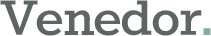
<style>
.page{position:relative;width:211px;height:36px;background:#ffffff}
.page>*{position:absolute;margin:0}
.t1{font:58px "Rokkitt-Bold";letter-spacing:-0.025em;color:#5e6562}
.t2{font:58px "Rokkitt-Bold";letter-spacing:-0.025em;color:#84af9b}
</style>
<div class="page">
<p class="t1" style="left:0px;top:0px;width:211px;height:36px">Venedor<span class="t2">.</span></p>
</div>
